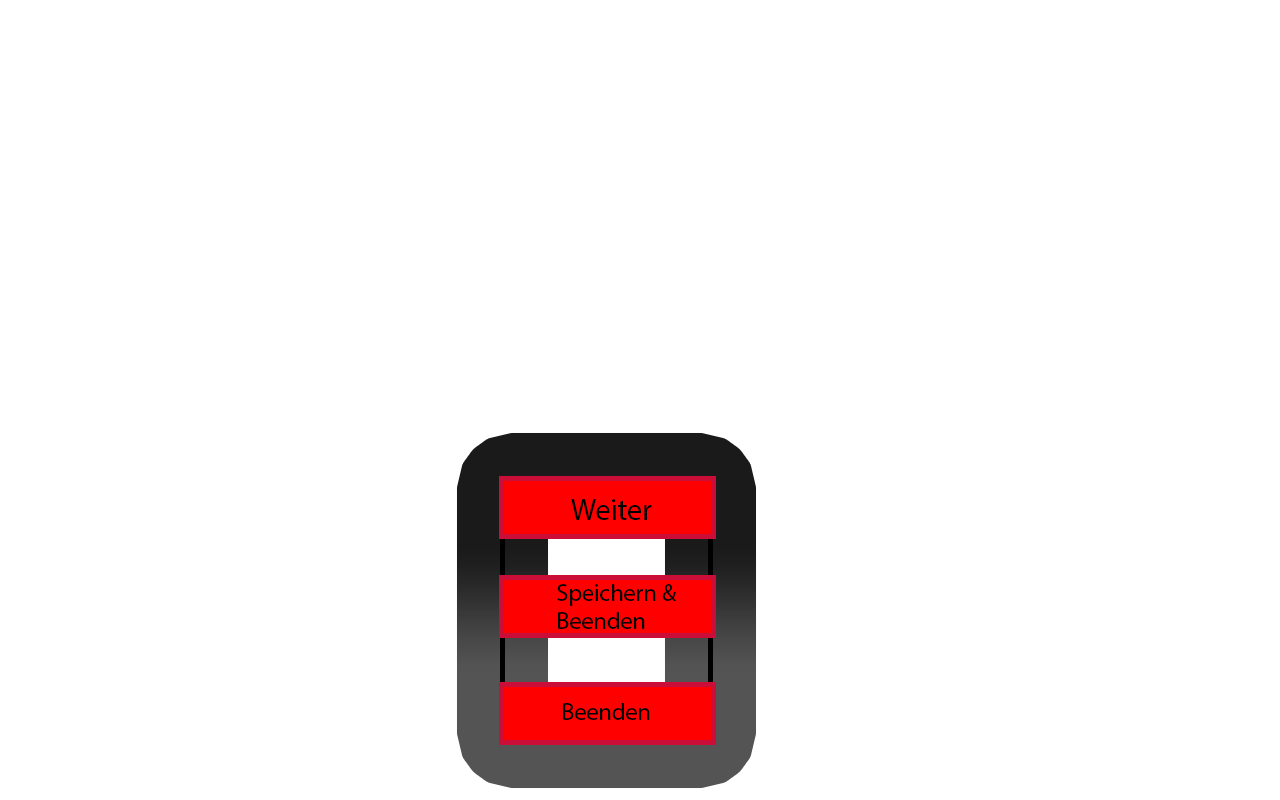
<style>
.page{position:relative;width:1280px;height:800px;background:#ffffff}
.page>*{position:absolute;margin:0}
.t1{font:30px "MyriadPro-Regular";color:#000000}
.t2{font:24px "MyriadPro-Regular";color:#000000}
</style>
<div class="page">
<p class="t1" style="left:571px;top:499px;width:81px;height:21px">Weiter</p>
<p class="t2" style="left:557px;top:584px;width:119px;height:45px">Speichern &amp;<br>Beenden</p>
<p class="t2" style="left:563px;top:703px;width:87px;height:17px">Beenden</p>
</div>
